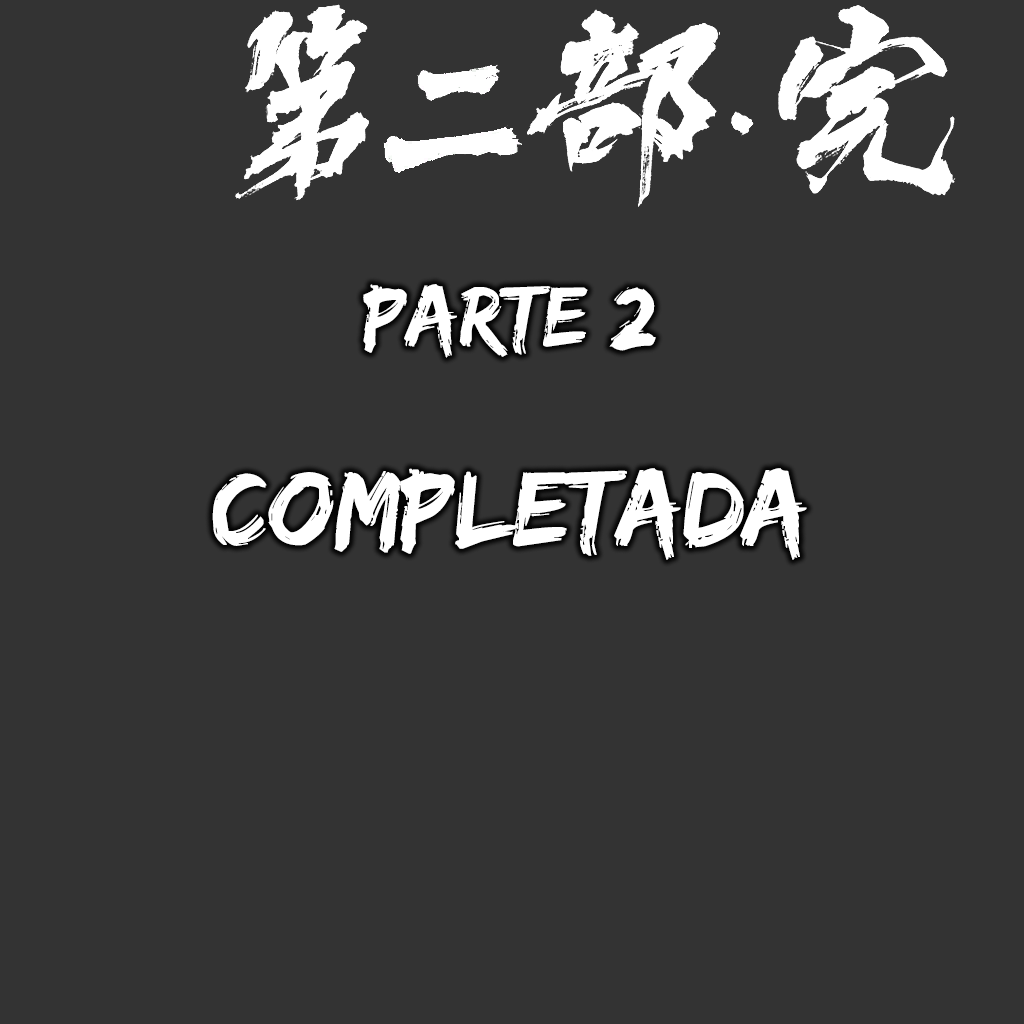
<style>
.page{position:relative;width:1024px;height:1024px;background:#333333}
.page>*{position:absolute;margin:0}
.t1{font:88.5px "EdoSZ";color:#ffffff}
.t2{font:109.9px "EdoSZ";color:#ffffff}
</style>
<div class="page">
<p class="t1" style="left:363px;top:284px;width:293px;height:74px">parte 2</p>
<p class="t2" style="left:212px;top:468px;width:595px;height:92px">COMPLETADA</p>
</div>
